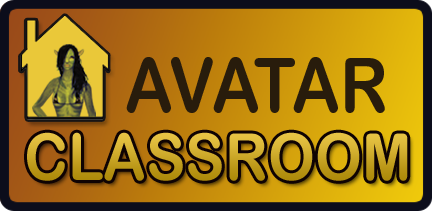
<style>
.page{position:relative;width:432px;height:211px}
.page>*{position:absolute;margin:0}
.t1{font:75.4px "ArialRoundedMTBold";color:#281c0c;scale:0.89 1}
.t2{font:139.7px "ArialRoundedMTBold";color:#281c0c;scale:0.89 1}
.t3{font:64.9px "ArialRoundedMTBold";scale:0.92 1}
</style>
<div class="page">
<p class="t1" style="left:126px;top:57px;width:259px;height:56px"><span class="t2">     </span>AVATAR</p>
<p class="t3" style="left:27px;top:132px;width:381px;height:49px">CLASSROOM</p>
</div>
